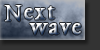
<style>
.page{position:relative;width:100px;height:50px}
.page>*{position:absolute;margin:0}
.t1{font:26.6px/15px "AGaramondPro-Regular";letter-spacing:0.06em;font-weight:bold;scale:0.86 1}
.t2{font:23.7px/15px "AGaramondPro-Regular";letter-spacing:0.06em;font-weight:bold;scale:0.96 1}
.t3{font:26.6px/15px "AGaramondPro-Regular";letter-spacing:0.1em;font-weight:bold;scale:0.86 1}
.t4{font:26.6px/15px "AGaramondPro-Regular";letter-spacing:-0.16em;font-weight:bold;scale:0.86 1}
.t5{font:26.6px/15px "AGaramondPro-Regular";letter-spacing:0.08em;font-weight:bold;scale:0.86 1}
</style>
<div class="page">
<p class="t1" style="left:4px;top:5px;width:77px;height:30px"><span class="t2">N</span>ex<span class="t3">t<br>   </span><span class="t4">v</span><span class="t5">v</span>av<span class="t3">e</span></p>
</div>
